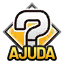
<style>
.page{position:relative;width:64px;height:64px;background:#ffffff}
.page>*{position:absolute;margin:0}
.t1{font:16px "Barlow-Bold";letter-spacing:-0.05em}
</style>
<div class="page">
<p class="t1" style="left:9px;top:47px;width:46px;height:12px">AJUDA</p>
</div>
